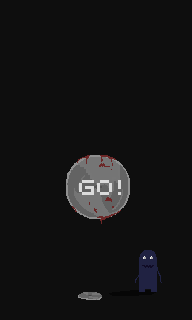
<style>
.page{position:relative;width:192px;height:320px;background:#0e0e0e}
.page>*{position:absolute;margin:0}
.t1{font:24px "Uni0553";color:#dbdbdb}
</style>
<div class="page">
<p class="t1" style="left:79px;top:180px;width:42px;height:15px">GO!</p>
<p class="t1" style="left:79px;top:180px;width:42px;height:15px">GO!</p>
</div>
